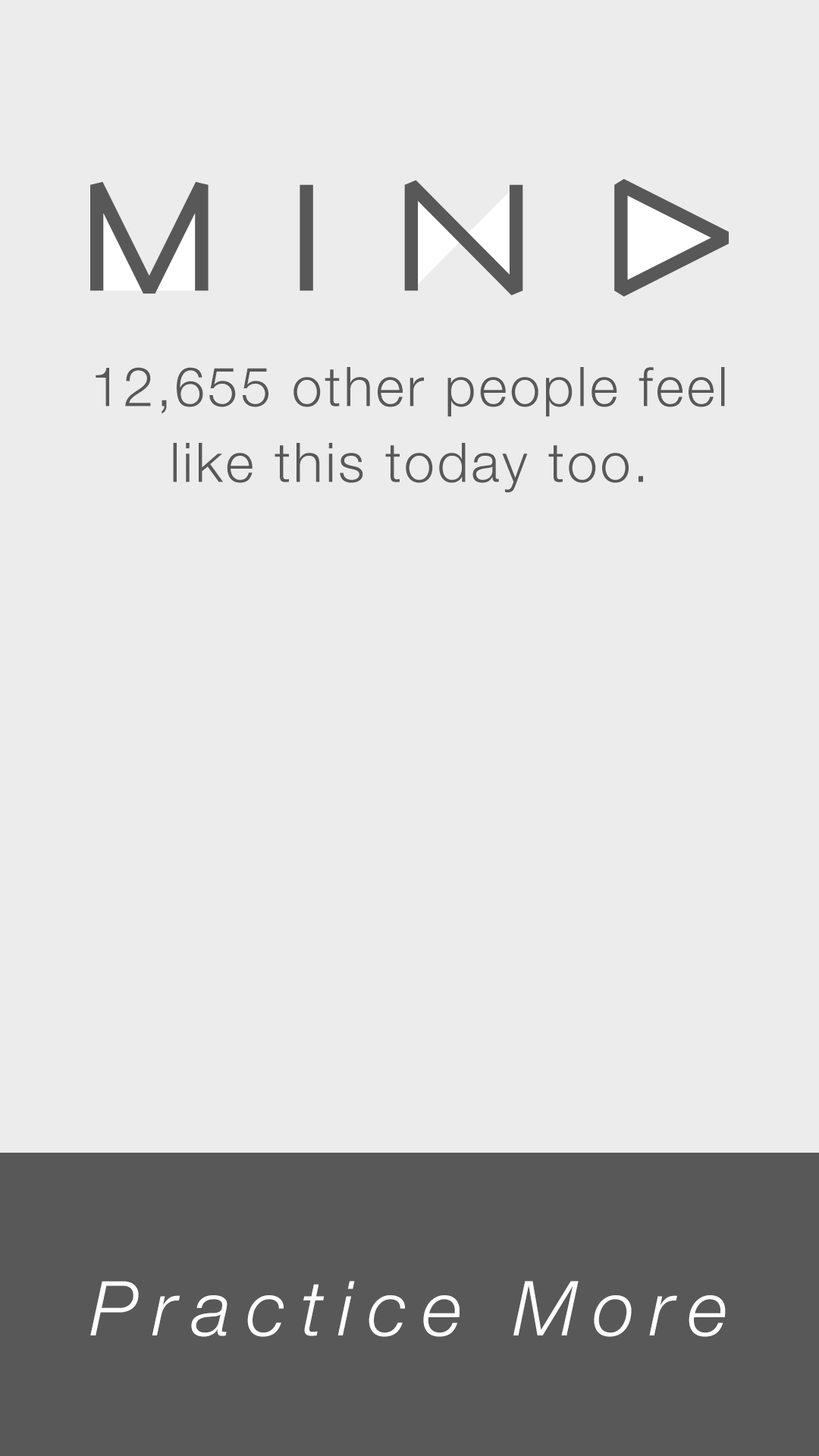
<style>
.page{position:relative;width:819px;height:1456px;background:#ececec}
.page>*{position:absolute;margin:0}
.t1{font:54.6px/75.8px "HelveticaNeue-Light";letter-spacing:0.05em;color:#585858}
.t2{font:75.8px "HelveticaNeue-LightItalic";letter-spacing:0.2em;color:#ffffff}
</style>
<div class="page">
<p class="t1" style="left:96px;top:367px;width:629px;height:126px;text-align:center">12,655 other people feel like this today too.</p>
<p class="t2" style="left:90px;top:1281px;width:636px;height:56px">Practice More</p>
</div>
